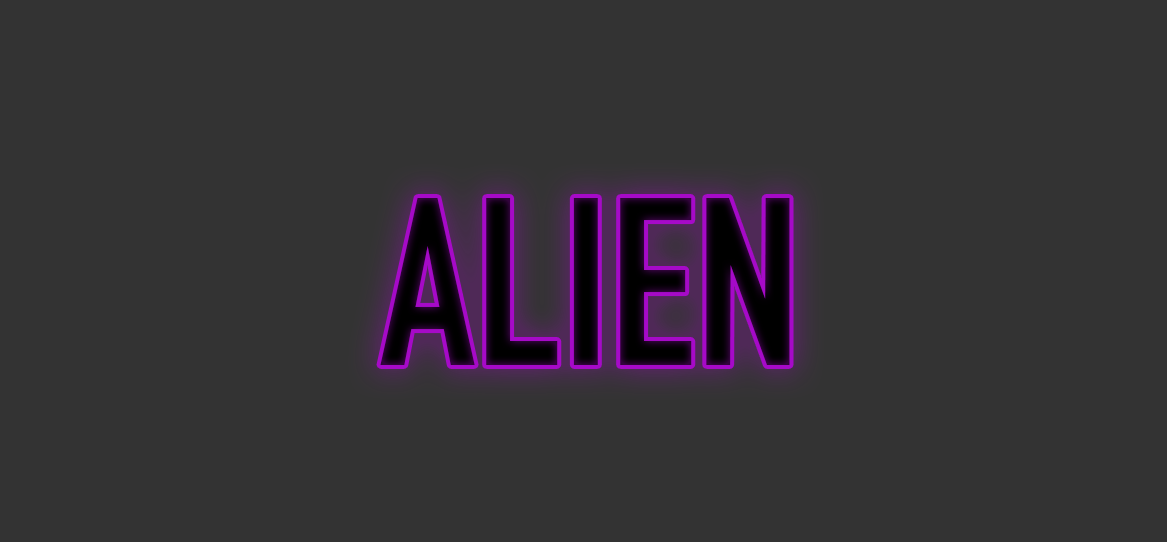
<style>
.page{position:relative;width:1167px;height:542px;background:#333333}
.page>*{position:absolute;margin:0}
.t1{font:233.7px "DINEngschrift";color:#070009}
</style>
<div class="page">
<p class="t1" style="left:380px;top:198px;width:410px;height:167px">ALIEN</p>
</div>
